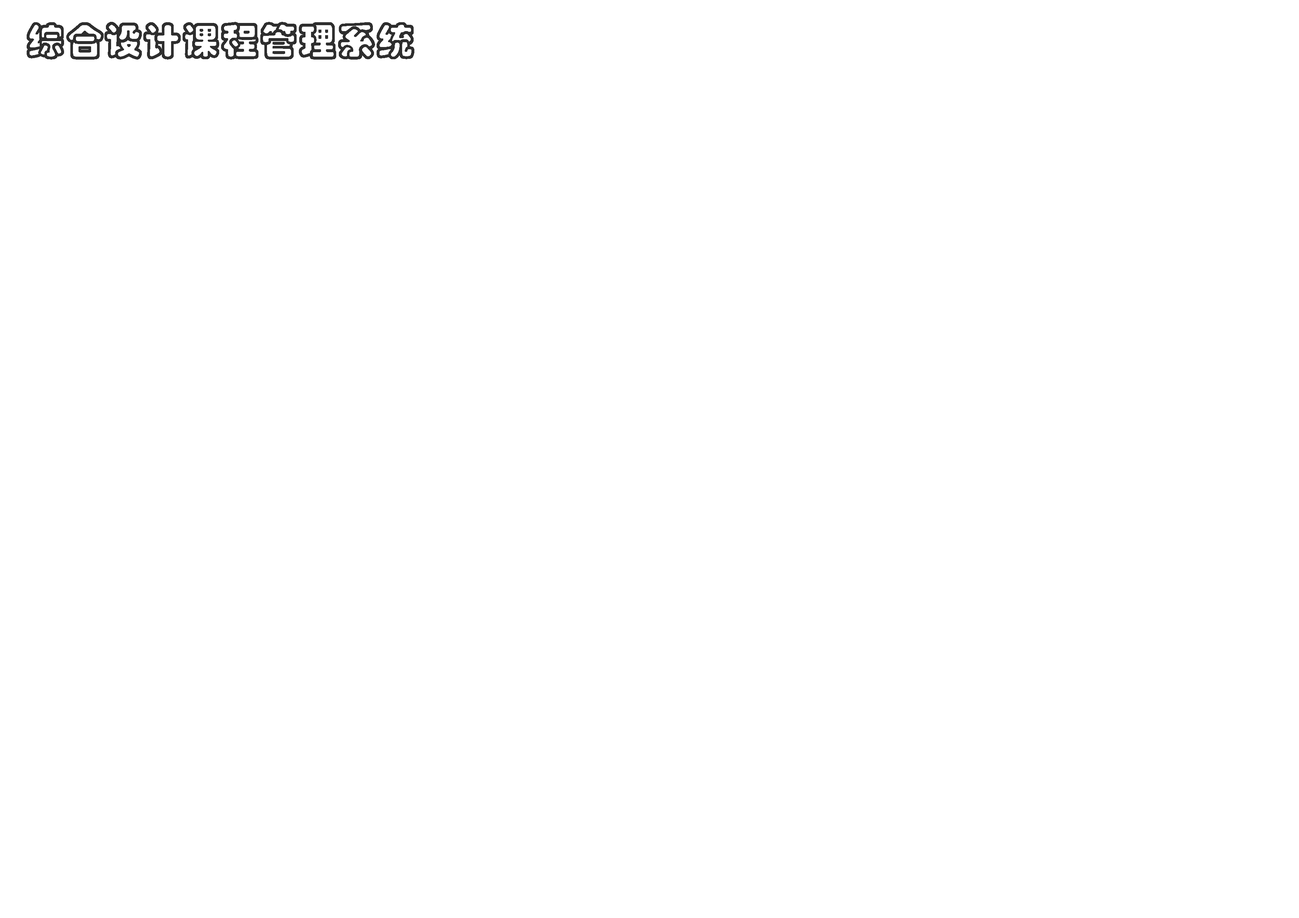
<style>
.page{position:relative;width:1299px;height:918px;background:#ffffff}
.page>*{position:absolute;margin:0}
.t1{font:37.8px "STCaiyun";color:#2e2e2e;font-weight:bold}
</style>
<div class="page">
<p class="t1" style="left:27px;top:22px;width:387px;height:38px">综合设计课程管理系统</p>
</div>
